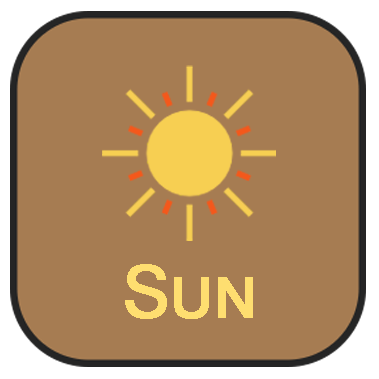
<style>
.page{position:relative;width:379px;height:379px;background:#a67c52}
.page>*{position:absolute;margin:0}
.t1{font:71.9px "ArialMT";letter-spacing:-0.025em;color:#fede70;font-variant:small-caps;font-weight:bold}
</style>
<div class="page">
<p class="t1" style="left:125px;top:264px;width:128px;height:55px">Sun</p>
</div>
